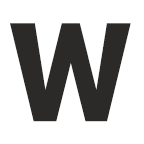
<style>
.page{position:relative;width:144px;height:144px;background:#ffffff}
.page>*{position:absolute;margin:0}
.t1{font:136px "Industry-Black";color:#2b2a28;text-transform:uppercase}
</style>
<div class="page">
<p class="t1" style="left:10px;top:23px;width:121px;height:99px">W</p>
</div>
